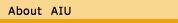
<style>
.page{position:relative;width:178px;height:23px;background:#f9d78f}
.page>*{position:absolute;margin:0}
.t1{font:10.7px "Verdana";letter-spacing:0.025em;color:#030200;font-weight:bold}
</style>
<div class="page">
<p class="t1" style="left:8px;top:6px;width:63px;height:9px">About  AIU</p>
</div>
